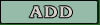
<style>
.page{position:relative;width:100px;height:25px;background:#96bca9}
.page>*{position:absolute;margin:0}
.t1{font:22.2px "JSChusrias";letter-spacing:0.025em;color:#d4d0c8;font-weight:bold;scale:1.15 1}
</style>
<div class="page">
<p class="t1" style="left:29px;top:6px;width:43px;height:12px">ADD</p>
</div>
